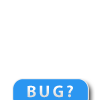
<style>
.page{position:relative;width:100px;height:100px;background:#ffffff}
.page>*{position:absolute;margin:0}
.t1{font:16.7px "MyriadPro-Bold";letter-spacing:0.14em;color:#ffffff}
</style>
<div class="page">
<p class="t1" style="left:27px;top:85px;width:46px;height:13px">BUG?</p>
</div>
